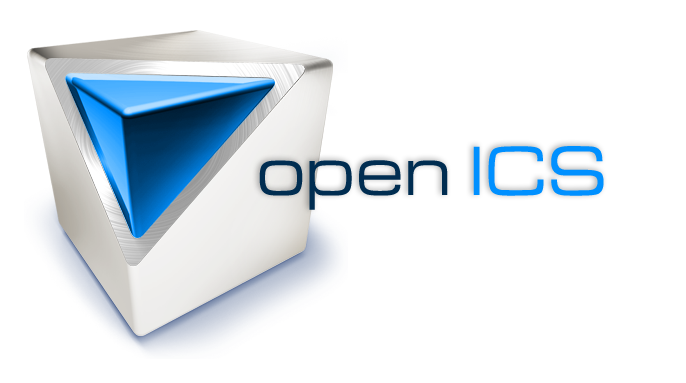
<style>
.page{position:relative;width:686px;height:383px;background:#ffffff}
.page>*{position:absolute;margin:0}
.t1{font:68.7px "BrinkExtended";letter-spacing:-0.03em;color:#002d51}
.t2{font:68.7px "BrinkExtended";letter-spacing:-0.03em;color:#0090ff}
</style>
<div class="page">
<p class="t1" style="left:259px;top:146px;width:345px;height:64px">open <span class="t2">ICS</span></p>
</div>
